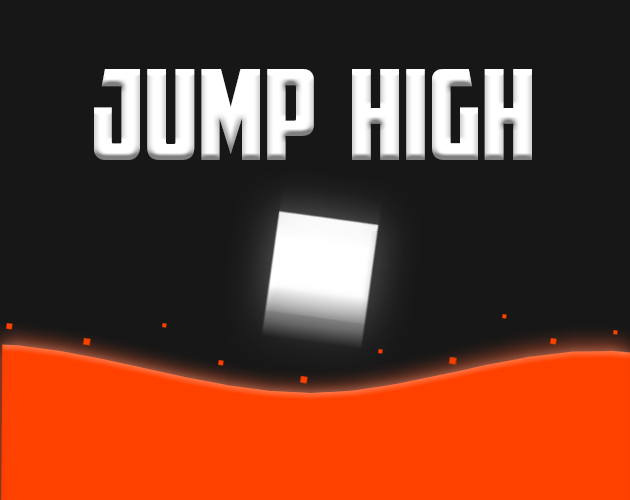
<style>
.page{position:relative;width:630px;height:500px;background:#171717}
.page>*{position:absolute;margin:0}
.t1{font:125px "AmericanCaptain";color:#ffffff}
</style>
<div class="page">
<p class="t1" style="left:94px;top:69px;width:438px;height:91px">JUMP  HIGH</p>
</div>
